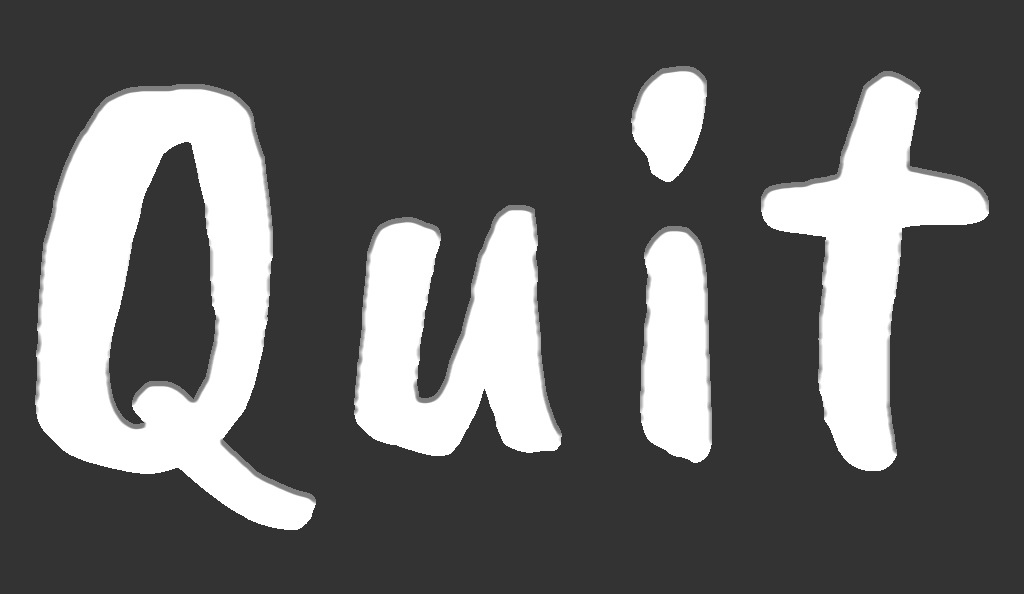
<style>
.page{position:relative;width:1024px;height:594px;background:#333333}
.page>*{position:absolute;margin:0}
.t1{font:586.5px "CaveatBrush-Regular";letter-spacing:0.04em;color:#ffffff}
</style>
<div class="page">
<p class="t1" style="left:35px;top:66px;width:954px;height:464px">Quit</p>
</div>
